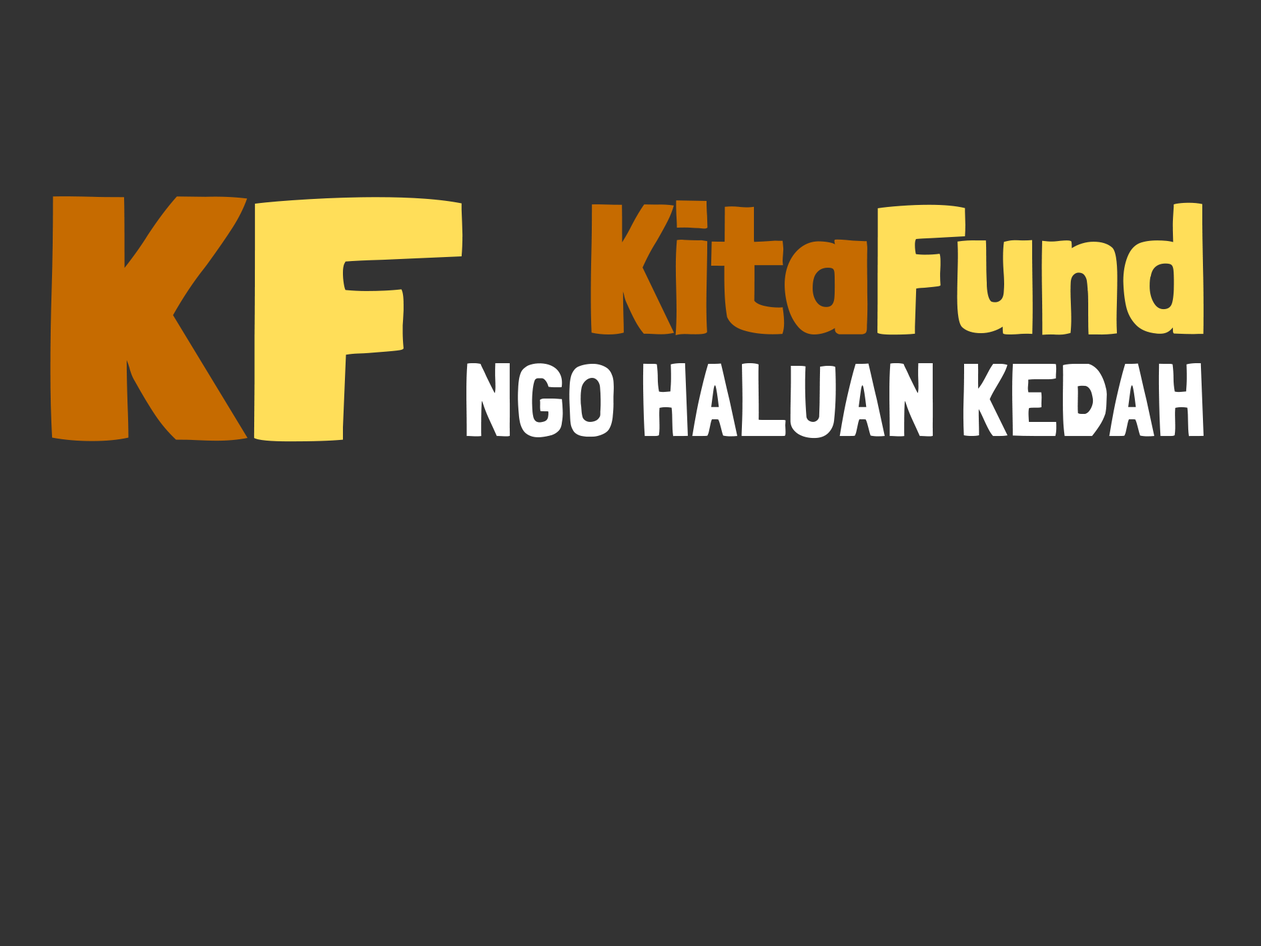
<style>
.page{position:relative;width:1261px;height:946px;background:#333333}
.page>*{position:absolute;margin:0}
.t1{font:343.8px "LondrinaSolid-Black";letter-spacing:0.01em;color:#c66b00;scale:1.26 1}
.t2{font:343.8px "LondrinaSolid-Black";letter-spacing:0.01em;color:#ffde59;scale:1.26 1}
.t3{font:182.7px "LondrinaSolid-Black";letter-spacing:0.01em;color:#c66b00}
.t4{font:182.7px "LondrinaSolid-Black";letter-spacing:0.01em;color:#ffde59}
.t5{font:103.7px "LondrinaSolid-Regular";letter-spacing:0.01em;color:#ffffff}
</style>
<div class="page">
<p class="t1" style="left:50px;top:196px;width:413px;height:246px">K<span class="t2">F</span></p>
<p class="t3" style="left:591px;top:200px;width:613px;height:136px">Kita<span class="t4">Fund</span></p>
<p class="t5" style="left:466px;top:363px;width:738px;height:75px">NGO HALUAN KEDAH</p>
</div>
